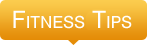
<style>
.page{position:relative;width:147px;height:45px}
.page>*{position:absolute;margin:0}
.t1{font:24px "Swiss721BT-Roman";letter-spacing:0.01em;color:#ffffff;font-variant:small-caps}
</style>
<div class="page">
<p class="t1" style="left:13px;top:10px;width:119px;height:19px">Fitness Tips</p>
</div>
